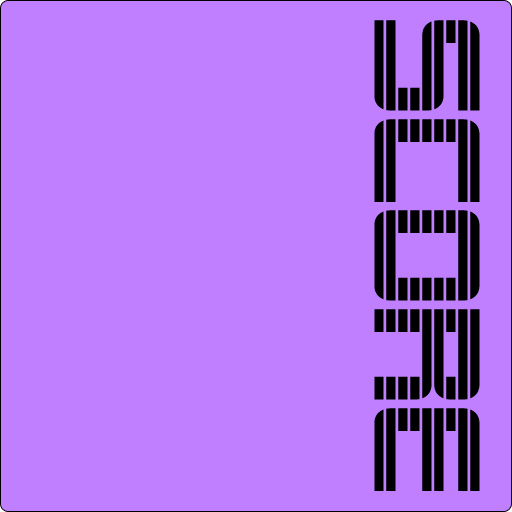
<style>
.page{position:relative;width:512px;height:512px;background:#bf7fff}
.page>*{position:absolute;margin:0}
.t1{font:149.7px "AlienEncounters";color:#000000}
</style>
<div class="page">
<p class="t1" style="left:374px;top:20px;width:106px;height:471px;rotate:90deg">Score</p>
</div>
